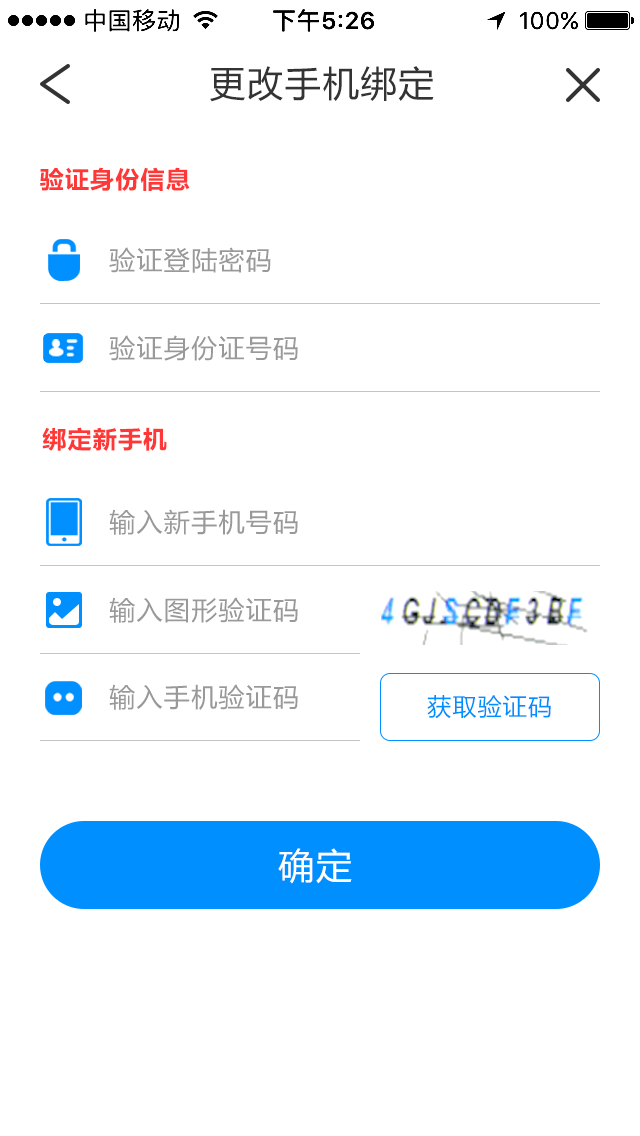
<style>
.page{position:relative;width:640px;height:1136px;background:#ffffff}
.page>*{position:absolute;margin:0}
.t1{font:36px "MicrosoftYaHei";letter-spacing:0.05em;color:#333333}
.t2{font:24px "MicrosoftYaHei-Bold";letter-spacing:0.05em;color:#ff3737}
.t3{font:26px "MicrosoftYaHei";letter-spacing:0.05em;color:#999999}
.t4{font:24px "MicrosoftYaHei";letter-spacing:0.05em;color:#008fff}
.t5{font:36px "MicrosoftYaHei";letter-spacing:0.05em;color:#ffffff}
</style>
<div class="page">
<p class="t1" style="left:210px;top:66px;width:224px;height:36px">更改手机绑定</p>
<p class="t2" style="left:40px;top:167px;width:150px;height:24px">验证身份信息</p>
<p class="t3" style="left:109px;top:247px;width:162px;height:26px">验证登陆密码</p>
<p class="t3" style="left:109px;top:335px;width:189px;height:26px">验证身份证号码</p>
<p class="t2" style="left:42px;top:427px;width:125px;height:24px">绑定新手机</p>
<p class="t3" style="left:109px;top:509px;width:189px;height:26px">输入新手机号码</p>
<p class="t3" style="left:109px;top:597px;width:189px;height:26px">输入图形验证码</p>
<p class="t3" style="left:109px;top:684px;width:189px;height:26px">输入手机验证码</p>
<p class="t4" style="left:427px;top:695px;width:124px;height:24px">获取验证码</p>
<p class="t5" style="left:278px;top:848px;width:74px;height:36px">确定</p>
</div>
